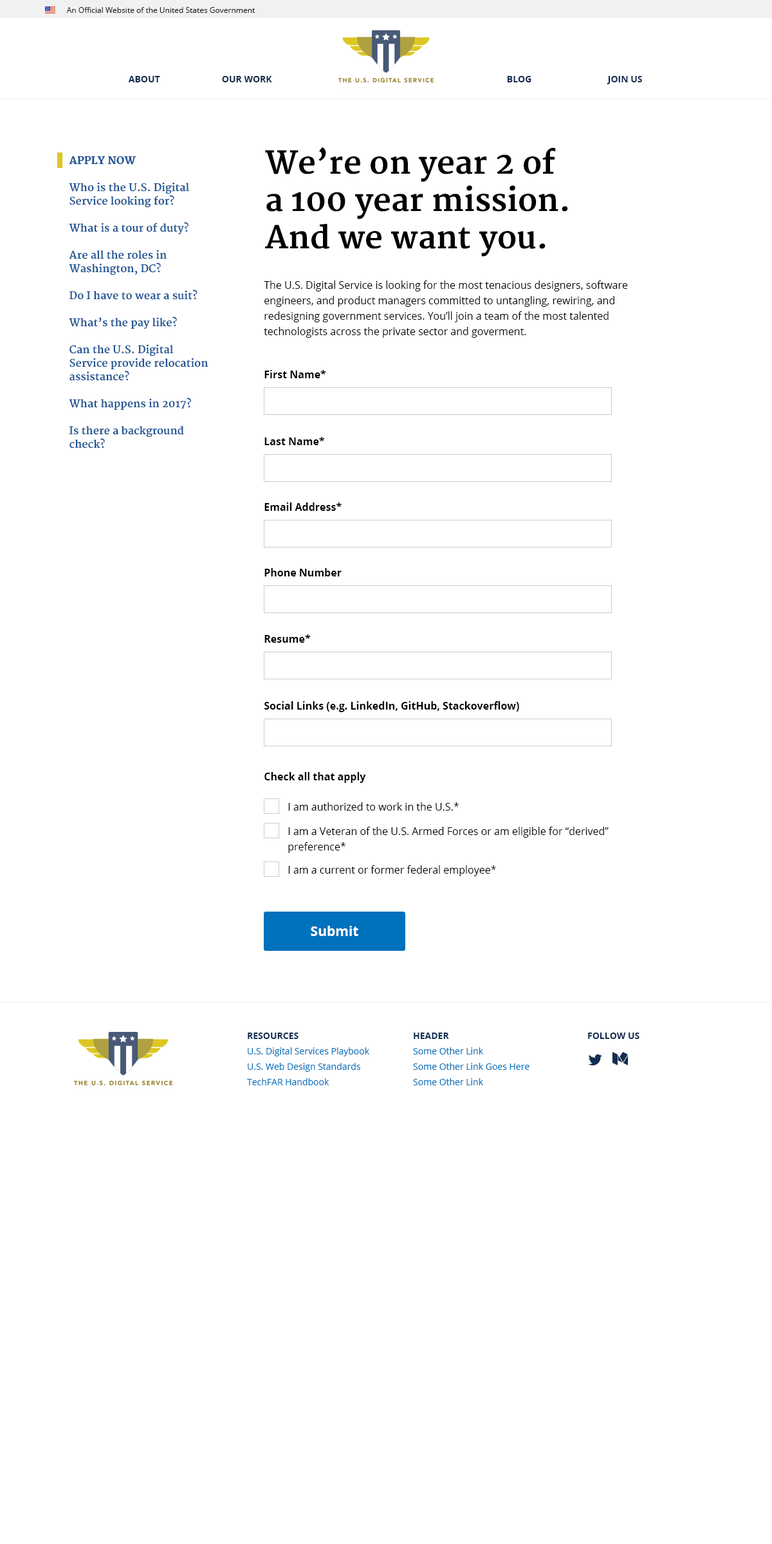
<style>
.page{position:relative;width:772px;height:1544px;background:#ffffff}
.page>*{position:absolute;margin:0}
.t1{font:7.7px "OpenSans";color:#212121}
.t2{font:9px "OpenSans-Bold";color:#112e51;text-transform:uppercase}
.t3{font:30.9px "Merriweather-Bold";color:#000000}
.t4{font:10.3px/13.5px "Merriweather-Bold";color:#205493}
.t5{font:10.3px/13.5px "Merriweather-Heavy";color:#205493}
.t6{font:10.3px/15.4px "OpenSans";color:#000000}
.t7{font:10.3px "OpenSans-Bold";color:#000000}
.t8{font:10.3px "OpenSans";color:#000000}
.t9{font:13.5px "OpenSans-Bold";color:#ffffff}
.t10{font:9px/15.4px "OpenSans";color:#0071bc}
.t11{font:9px/15.4px "OpenSans-Bold";color:#112e51;text-transform:uppercase}
</style>
<div class="page">
<p class="t1" style="left:66px;top:7px;width:189px;height:6px">An Official Website of the United States Government</p>
<p class="t2" style="left:128px;top:76px;width:32px;height:6px">About</p>
<p class="t2" style="left:222px;top:76px;width:50px;height:6px">our work</p>
<p class="t2" style="left:507px;top:76px;width:24px;height:6px">BLOG</p>
<p class="t2" style="left:607px;top:76px;width:35px;height:8px">JOIN US</p>
<p class="t3" style="left:265px;top:147px;width:303px;height:110px">We’re on year 2 of<br>a 100 year mission. <br>And we want you.</p>
<p class="t4" style="left:69px;top:156px;width:139px;height:292px"><span class="t5">APPLY NOW<br></span><br>Who is the U.S. Digital Service looking for?<br><br>What is a tour of duty?<br><br>Are all the roles in <br>Washington, DC?<br><br>Do I have to wear a suit?<br><br>What’s the pay like?<br><br>Can the U.S. Digital <br>Service provide relocation assistance? <br><br>What happens in 2017?<br><br>Is there a background check?</p>
<p class="t6" style="left:264px;top:281px;width:364px;height:57px">The U.S. Digital Service is looking for the most tenacious designers, software <br>engineers, and product managers committed to untangling, rewiring, and <br>redesigning government services. You’ll join a team of the most talented <br>technologists across the private sector and goverment.</p>
<p class="t7" style="left:264px;top:370px;width:62px;height:8px">First Name*</p>
<p class="t7" style="left:264px;top:437px;width:60px;height:8px">Last Name*</p>
<p class="t7" style="left:264px;top:503px;width:78px;height:8px">Email Address*</p>
<p class="t7" style="left:264px;top:568px;width:78px;height:9px">Phone Number</p>
<p class="t7" style="left:264px;top:634px;width:47px;height:9px">Resume*</p>
<p class="t7" style="left:264px;top:701px;width:255px;height:11px">Social Links (e.g. LinkedIn, GitHub, Stackoverflow)</p>
<p class="t7" style="left:264px;top:772px;width:102px;height:11px">Check all that apply</p>
<p class="t8" style="left:288px;top:802px;width:171px;height:9px">I am authorized to work in the U.S.*</p>
<p class="t6" style="left:288px;top:827px;width:321px;height:26px">I am a Veteran of the U.S. Armed Forces or am eligible for “derived”<br>preference*</p>
<p class="t8" style="left:288px;top:865px;width:208px;height:11px">I am a current or former federal employee*</p>
<p class="t9" style="left:311px;top:926px;width:47px;height:10px">Submit</p>
<p class="t10" style="left:247px;top:1033px;width:122px;height:53px"><span class="t11">Resources<br></span>U.S. Digital Services Playbook <br>U.S. Web Design Standards<br>TechFAR Handbook</p>
<p class="t10" style="left:413px;top:1033px;width:117px;height:53px"><span class="t11">Header<br></span>Some Other Link<br>Some Other Link Goes Here<br>Some Other Link</p>
<p class="t2" style="left:588px;top:1033px;width:52px;height:6px">follow us</p>
</div>
